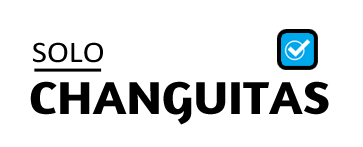
<style>
.page{position:relative;width:363px;height:147px;background:#ffffff}
.page>*{position:absolute;margin:0}
.t1{font:30px "Calibri";color:#000000;scale:1.1 1}
.t2{font:47px "Amaranth-Bold";color:#000000;scale:1.1 1}
</style>
<div class="page">
<p class="t1" style="left:33px;top:42px;width:70px;height:21px">SOLO</p>
<p class="t2" style="left:30px;top:81px;width:299px;height:44px">CHANGUITAS</p>
</div>
